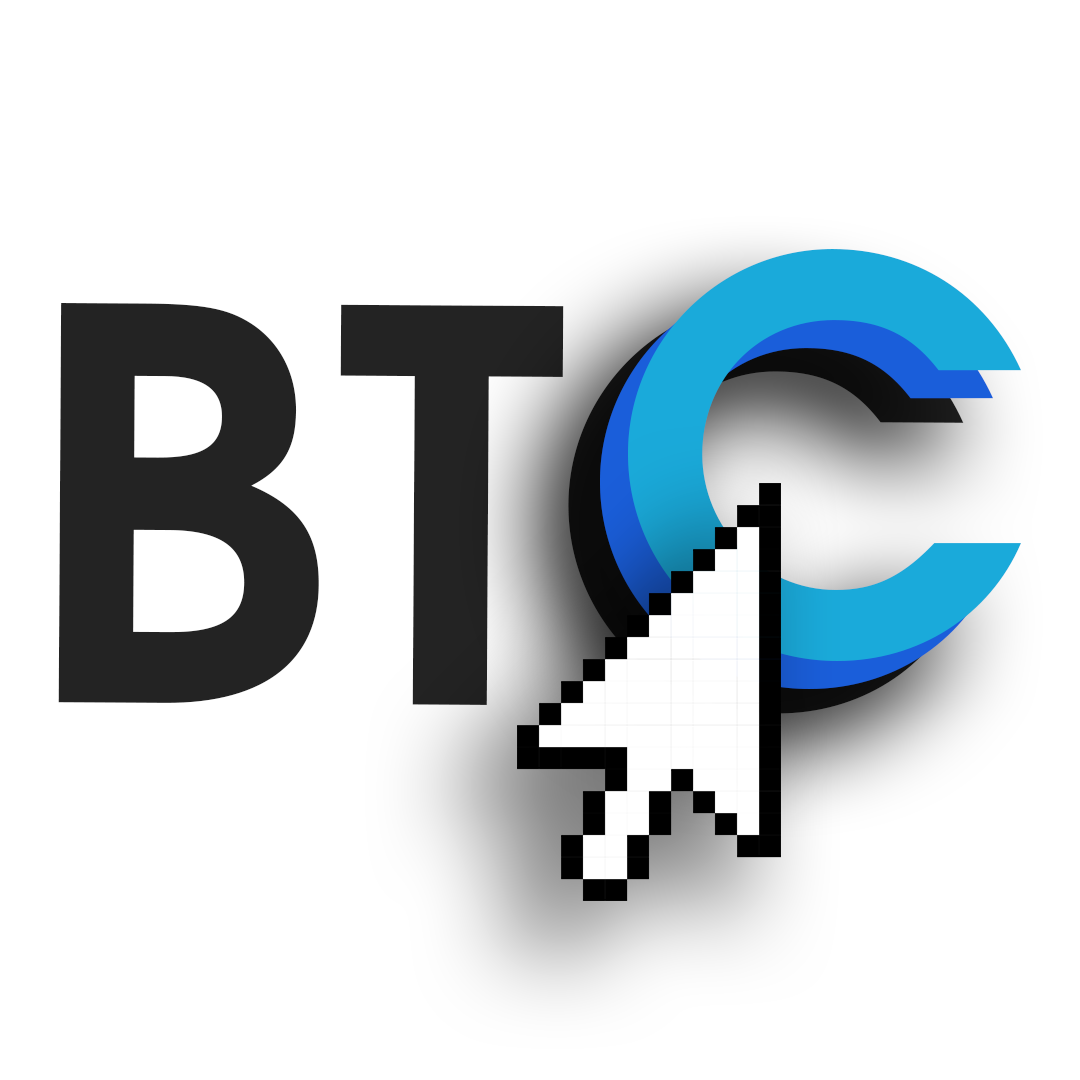
<style>
.page{position:relative;width:1080px;height:1080px;background:#ffffff}
.page>*{position:absolute;margin:0}
.t1{font:538.4px "TeXGyreAdventor-Bold";color:#1aaada}
.t2{font:538.4px "TeXGyreAdventor-Bold"}
.t3{font:540.2px "TeXGyreAdventor-Bold";color:#232323}
</style>
<div class="page">
<p class="t1" style="left:628px;top:249px;width:393px;height:412px">C</p>
<p class="t2" style="left:600px;top:277px;width:393px;height:412px">C</p>
<p class="t3" style="left:58px;top:300px;width:906px;height:414px">BTC</p>
</div>
